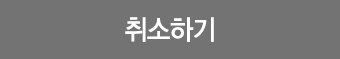
<style>
.page{position:relative;width:340px;height:59px;background:#737373}
.page>*{position:absolute;margin:0}
.t1{font:28px "YDVYGO33";letter-spacing:-0.025em;color:#ffffff;scale:0.91 1}
</style>
<div class="page">
<p class="t1" style="left:125px;top:17px;width:89px;height:25px">취소하기</p>
</div>
